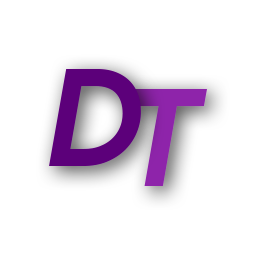
<style>
.page{position:relative;width:256px;height:256px;background:#ffffff}
.page>*{position:absolute;margin:0}
.t1{font:135.3px "ProductSans-BoldItalic";letter-spacing:-0.22em;color:#5c007a}
.t2{font:135.3px "ProductSans-BoldItalic";letter-spacing:-0.22em;color:#8e24aa}
</style>
<div class="page">
<p class="t1" style="left:49px;top:69px;width:92px;height:97px">D</p>
<p class="t2" style="left:131px;top:89px;width:76px;height:97px">T</p>
</div>
